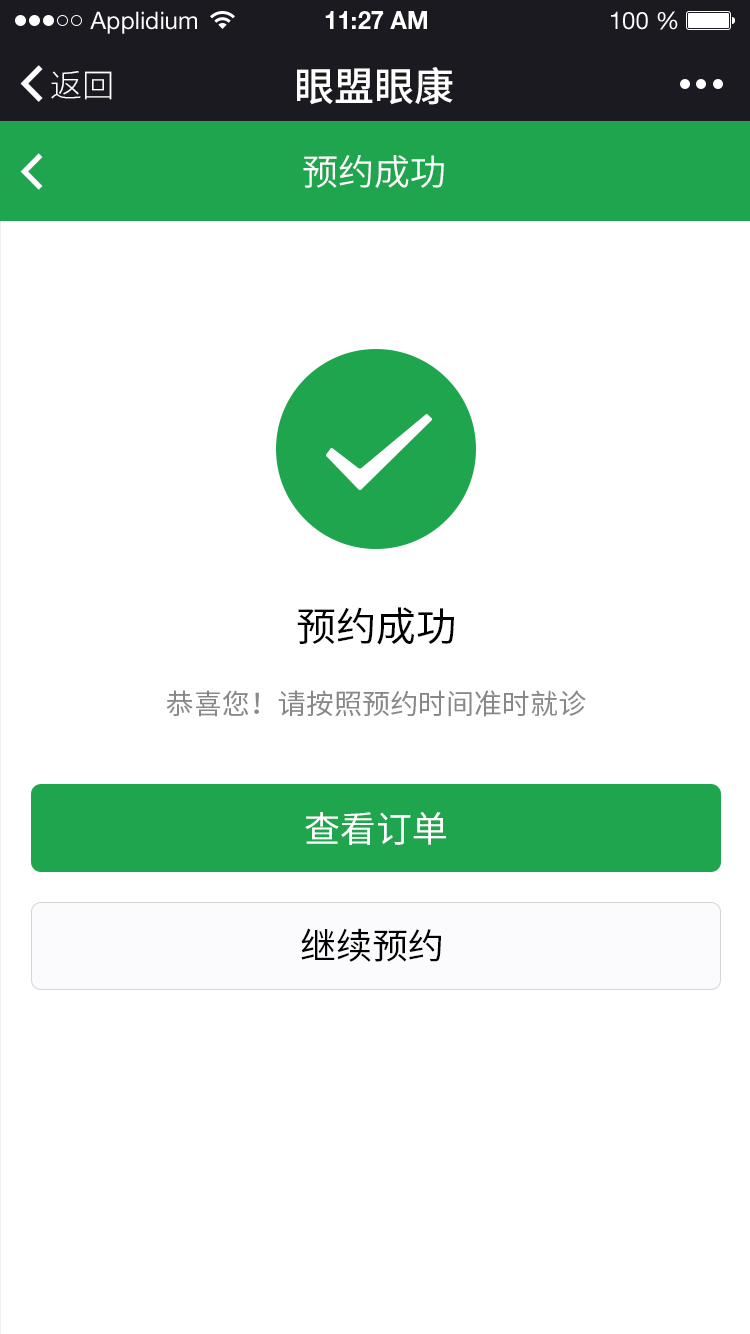
<style>
.page{position:relative;width:750px;height:1334px;background:#ffffff}
.page>*{position:absolute;margin:0}
.t1{font:24px "HelveticaNeueLTStd-Roman";color:#ffffff}
.t2{font:24px "HelveticaNeueLTStd-Bd";color:#ffffff}
.t3{font:32px "SourceHanSansCN-Light";color:#ffffff}
.t4{font:40px "SourceHanSansCN-Medium";color:#ffffff}
.t5{font:36px "SourceHanSansCN-Normal";color:#ffffff}
.t6{font:40px "SourceHanSansCN-Regular";color:#000000}
.t7{font:28px "SourceHanSansCN-Regular";color:#888888}
.t8{font:36px "SourceHanSansCN-Regular";color:#ffffff}
.t9{font:36px "SourceHanSansCN-Regular";color:#000000}
</style>
<div class="page">
<p class="t1" style="left:90px;top:11px;width:107px;height:23px">Applidium</p>
<p class="t2" style="left:325px;top:11px;width:102px;height:18px">11:27 AM</p>
<p class="t1" style="left:611px;top:11px;width:67px;height:19px">100 %</p>
<p class="t3" style="left:51px;top:71px;width:61px;height:29px">返回</p>
<p class="t4" style="left:297px;top:67px;width:156px;height:38px">眼盟眼康</p>
<p class="t5" style="left:303px;top:155px;width:141px;height:33px">预约成功</p>
<p class="t6" style="left:297px;top:607px;width:157px;height:38px">预约成功</p>
<p class="t7" style="left:166px;top:690px;width:420px;height:27px">恭喜您！请按照预约时间准时就诊</p>
<p class="t8" style="left:305px;top:812px;width:141px;height:33px">查看订单</p>
<p class="t9" style="left:301px;top:928px;width:140px;height:34px">继续预约</p>
</div>
